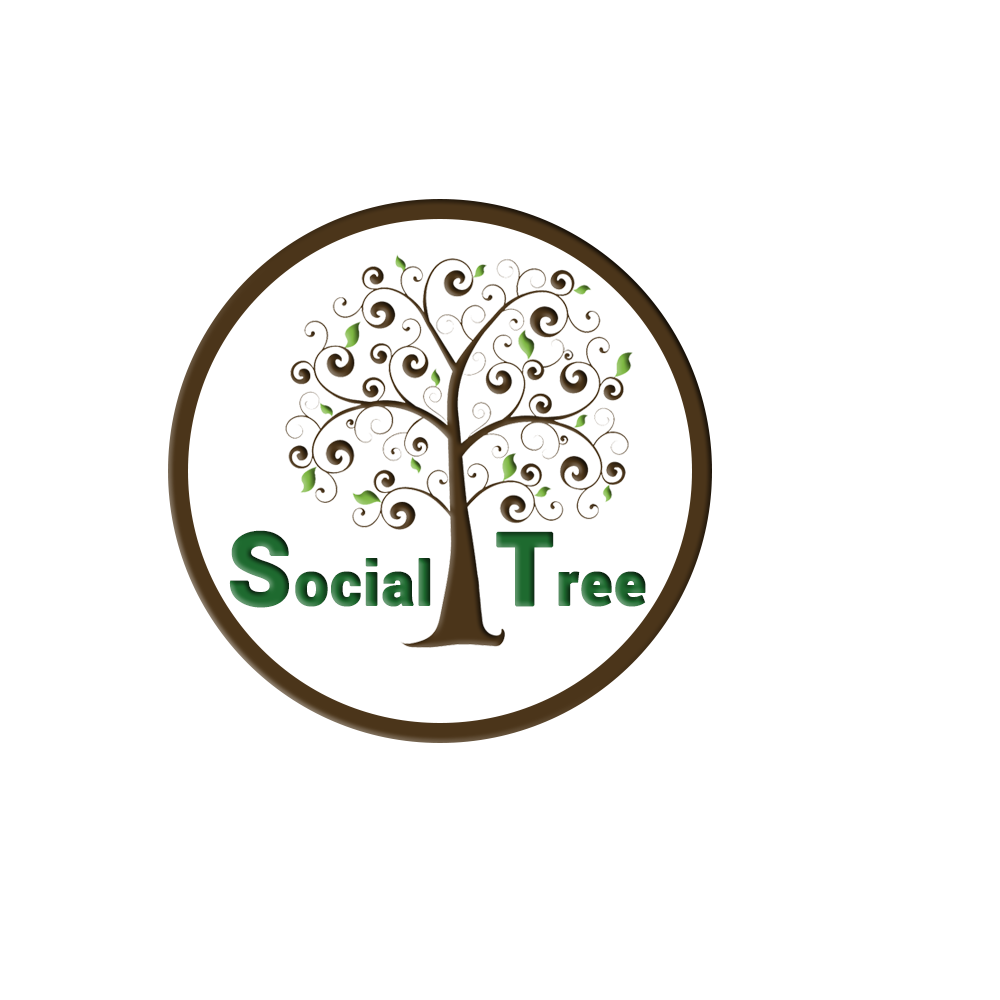
<style>
.page{position:relative;width:1000px;height:1000px;background:#ffffff}
.page>*{position:absolute;margin:0}
.t1{font:60.6px "Roboto-Black";letter-spacing:0.01em;font-weight:bold}
.t2{font:101px "Roboto-Black";letter-spacing:0.01em;font-weight:bold}
</style>
<div class="page">
<p class="t1" style="left:229px;top:530px;width:417px;height:78px"><span class="t2">S</span>ocial         <span class="t2">T</span>ree</p>
</div>
